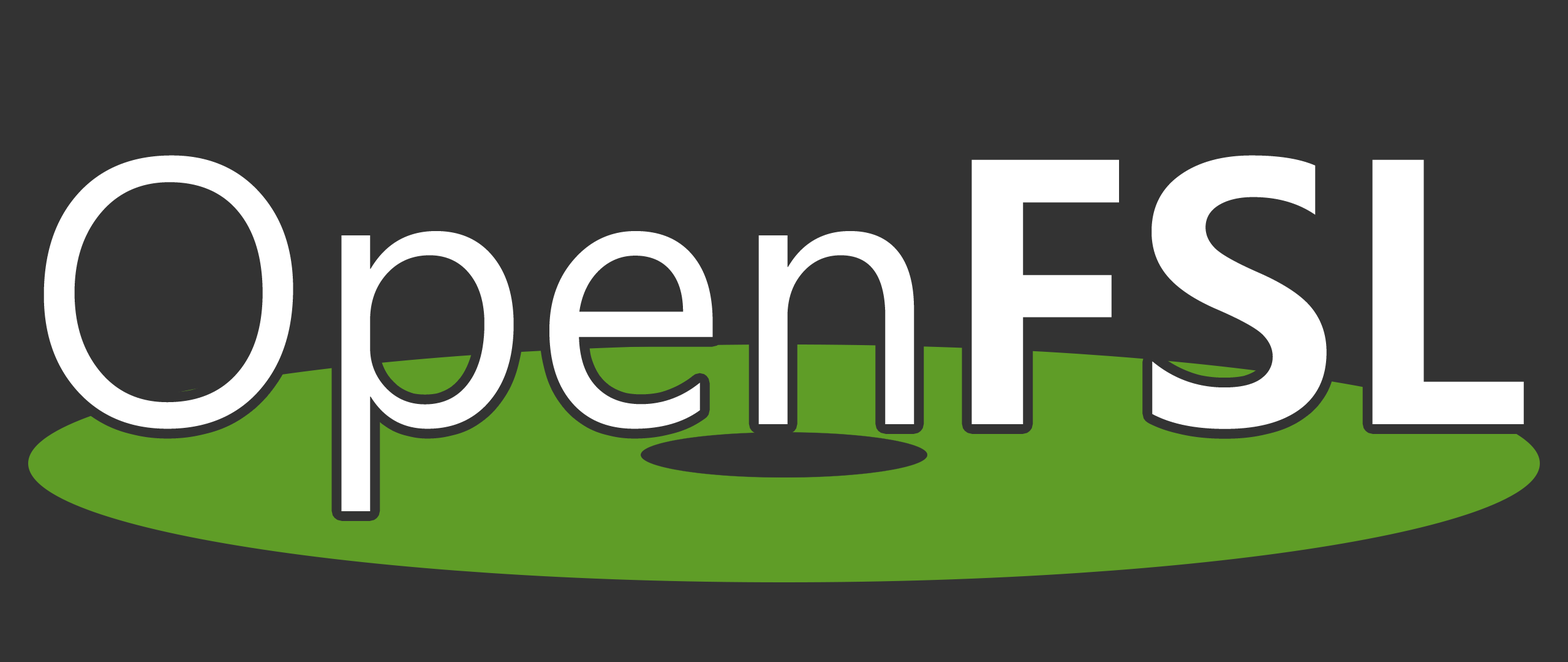
<style>
.page{position:relative;width:1568px;height:662px;background:#333333}
.page>*{position:absolute;margin:0}
.t1{font:367.5px "MalgunGothic";color:#ffffff}
.t2{font:367.5px "MalgunGothicBold";color:#ffffff}
</style>
<div class="page">
<p class="t1" style="left:43px;top:155px;width:1481px;height:356px">Open<span class="t2">FSL</span></p>
</div>
